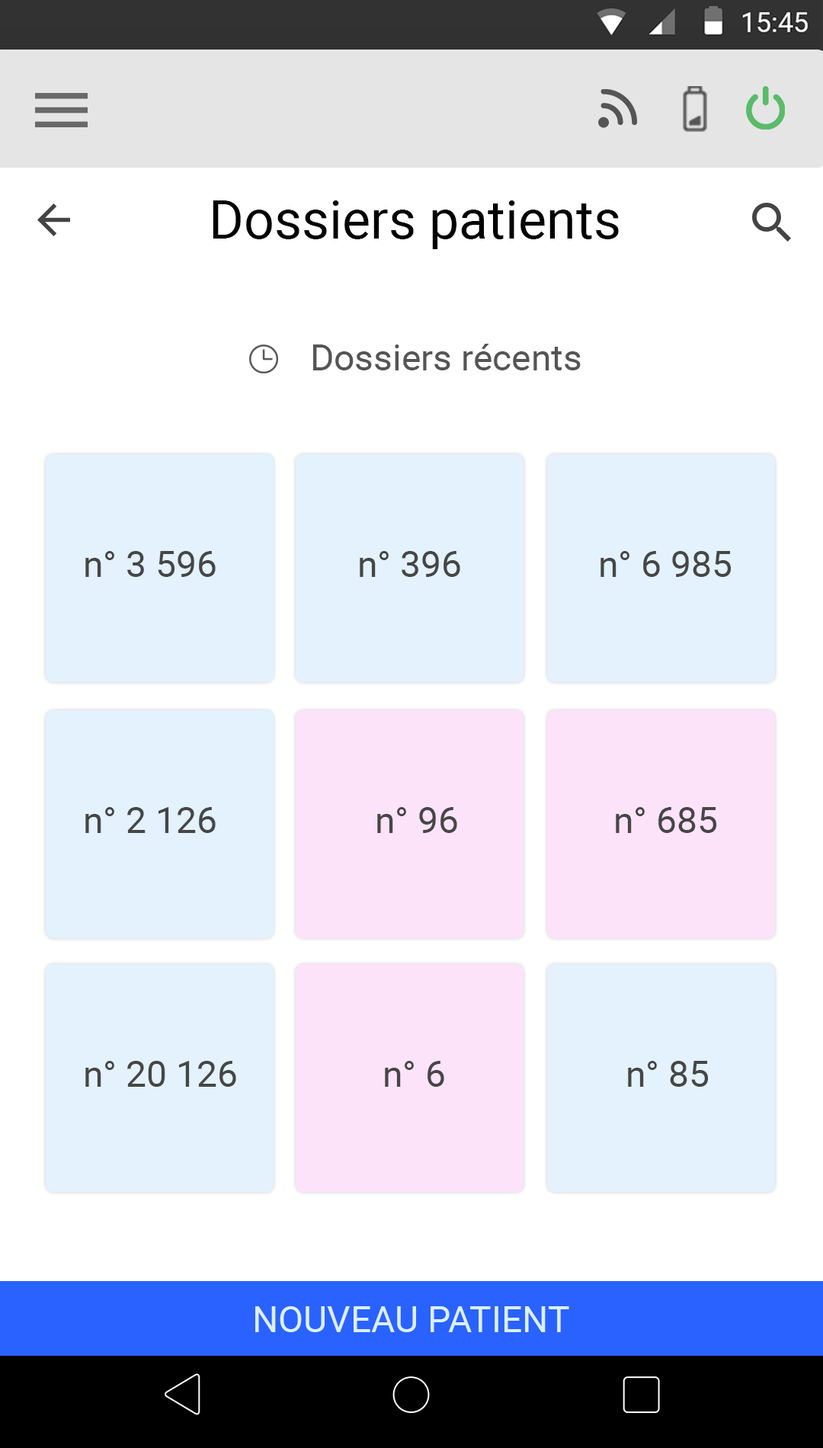
<style>
.page{position:relative;width:823px;height:1448px;background:#ffffff}
.page>*{position:absolute;margin:0}
.t1{font:53.4px "Roboto-Regular";color:#000000}
.t2{font:36.6px "Roboto-Regular";color:#565555}
.t3{font:36.6px "Roboto-Regular";color:#464646}
.t4{font:36.6px "Roboto-Regular";color:#dbeff9}
</style>
<div class="page">
<p class="t1" style="left:213px;top:200px;width:406px;height:49px">Dossiers patients</p>
<p class="t2" style="left:313px;top:344px;width:268px;height:26px">Dossiers récents</p>
<p class="t3" style="left:85px;top:551px;width:131px;height:26px">n° 3 596</p>
<p class="t3" style="left:360px;top:551px;width:100px;height:26px">n° 396</p>
<p class="t3" style="left:601px;top:551px;width:131px;height:26px">n° 6 985</p>
<p class="t3" style="left:85px;top:807px;width:131px;height:26px">n° 2 126</p>
<p class="t3" style="left:377px;top:807px;width:80px;height:26px">n° 96</p>
<p class="t3" style="left:616px;top:807px;width:101px;height:26px">n° 685</p>
<p class="t3" style="left:85px;top:1061px;width:151px;height:26px">n° 20 126</p>
<p class="t3" style="left:385px;top:1061px;width:59px;height:26px">n° 6</p>
<p class="t3" style="left:628px;top:1061px;width:81px;height:26px">n° 85</p>
<p class="t4" style="left:255px;top:1307px;width:314px;height:26px">NOUVEAU PATIENT</p>
</div>
